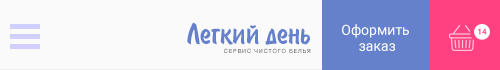
<style>
.page{position:relative;width:500px;height:70px;background:#fafafa}
.page>*{position:absolute;margin:0}
.t1{font:33.4px "BrushType-SemiBold";color:#6581cc}
.t2{font:14px/16px "Roboto-Regular";color:#ffffff}
.t3{font:8.2px "Roboto-Bold";text-transform:uppercase}
.t4{font:5.7px "HelveticaNeue";letter-spacing:0.15em;text-transform:uppercase}
</style>
<div class="page">
<p class="t1" style="left:187px;top:22px;width:123px;height:23px">Легкий день</p>
<p class="t2" style="left:342px;top:24px;width:67px;height:27px;text-align:center">Оформить <br>заказ</p>
<p class="t3" style="left:478px;top:28px;width:9px;height:7px">14</p>
<p class="t4" style="left:224px;top:48px;width:87px;height:5px">Сервис чистого белья</p>
</div>
